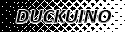
<style>
.page{position:relative;width:128px;height:32px;background:#000000}
.page>*{position:absolute;margin:0}
.t1{font:20.8px "Calibri-BoldItalic";color:#000000}
</style>
<div class="page">
<p class="t1" style="left:16px;top:10px;width:96px;height:13px">DUCKUINO</p>
</div>
